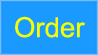
<style>
.page{position:relative;width:98px;height:55px;background:#1a99ff}
.page>*{position:absolute;margin:0}
.t1{font:27.5px "ArialMT";color:#f6ff00}
</style>
<div class="page">
<p class="t1" style="left:15px;top:16px;width:70px;height:22px">Order</p>
</div>
